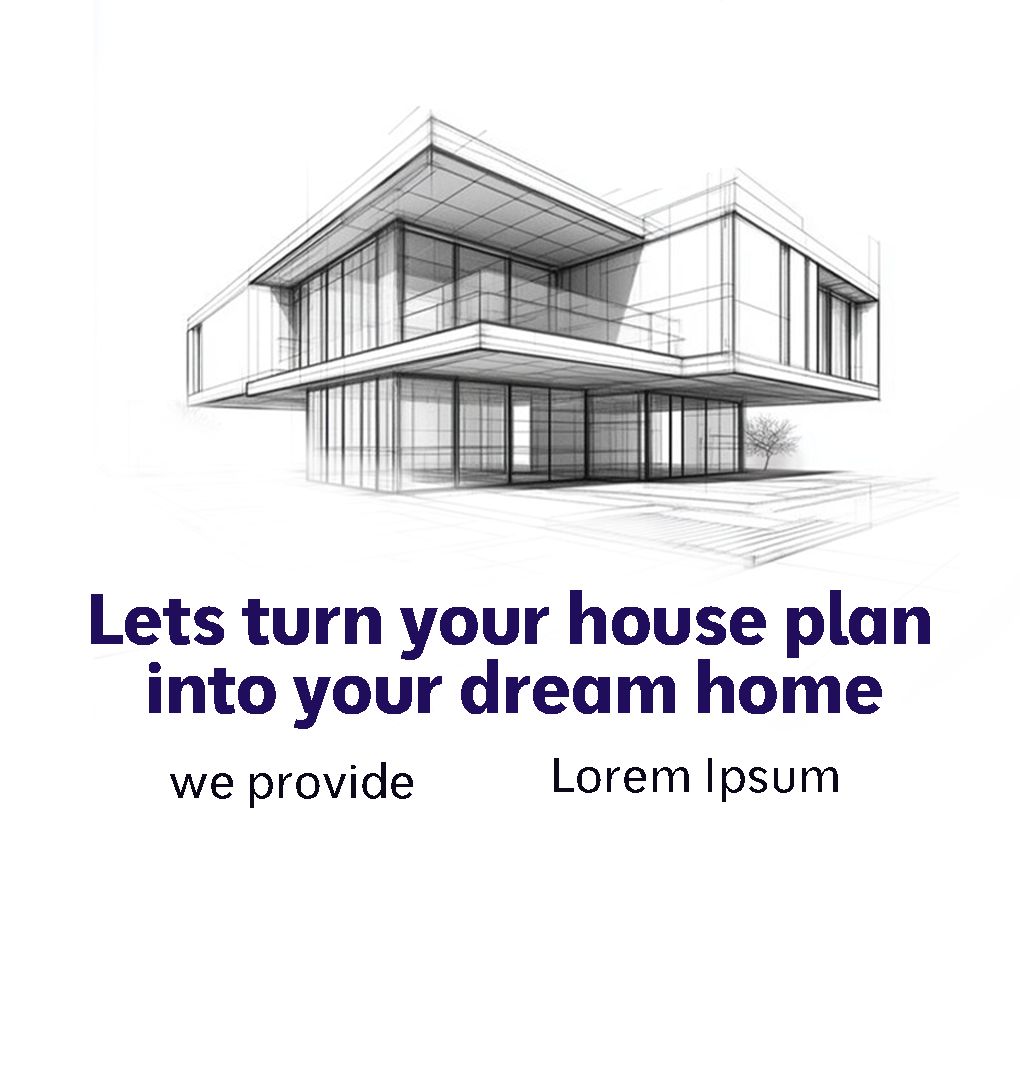
<style>
.page{position:relative;width:1020px;height:1080px;background:#ffffff}
.page>*{position:absolute;margin:0}
.t1{font:72px "Moderustic-Bold";color:#200e5c}
.t2{font:48px "Moderustic-Regular";color:#0c081a}
</style>
<div class="page">
<p class="t1" style="left:149px;top:659px;width:733px;height:70px">into your dream home</p>
<p class="t2" style="left:554px;top:758px;width:284px;height:44px">Lorem Ipsum</p>
<p class="t2" style="left:170px;top:762px;width:243px;height:46px">we provide</p>
</div>
